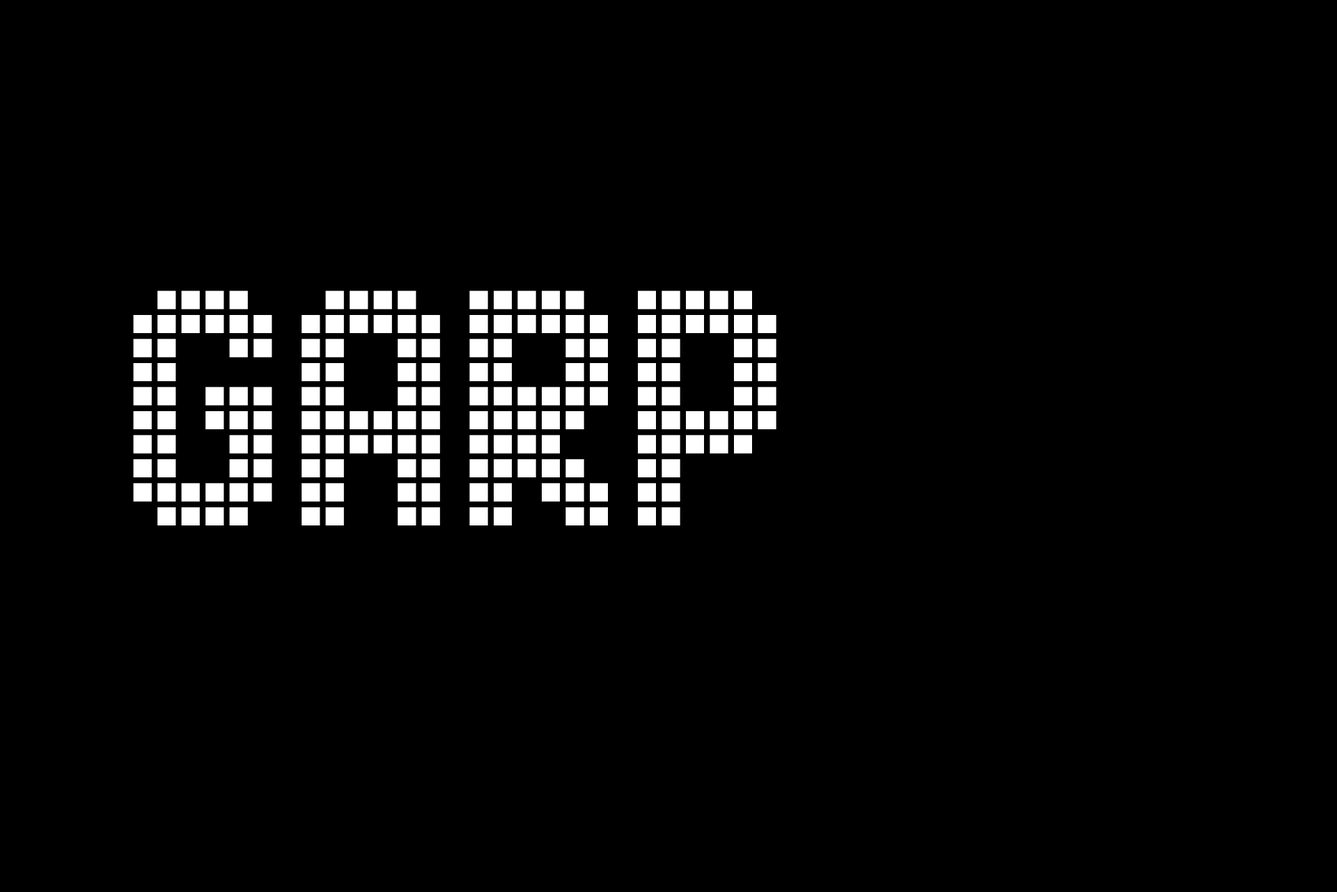
<style>
.page{position:relative;width:1337px;height:892px;background:#000000}
.page>*{position:absolute;margin:0}
.t1{font:300.2px "AdvancedLEDBoard-7";color:#ffffff}
</style>
<div class="page">
<p class="t1" style="left:133px;top:290px;width:644px;height:235px">GARP</p>
</div>
